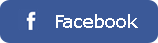
<style>
.page{position:relative;width:158px;height:43px;background:#3b5998}
.page>*{position:absolute;margin:0}
.t1{font:18px "Verdana";color:#ffffff}
</style>
<div class="page">
<p class="t1" style="left:56px;top:14px;width:82px;height:14px">Facebook</p>
</div>
